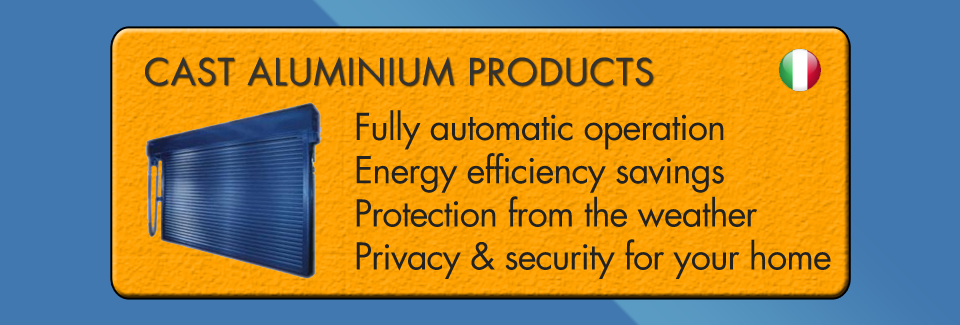
<style>
.page{position:relative;width:960px;height:325px;background:#4178af}
.page>*{position:absolute;margin:0}
.t1{font:36px "FuturaLT-Book";letter-spacing:0.025em;color:#333333}
.t2{font:36px "FuturaLT-Book";letter-spacing:-0.025em;color:#222222}
</style>
<div class="page">
<p class="t1" style="left:145px;top:56px;width:508px;height:30px">CAST ALUMINIUM PRODUCTS</p>
<p class="t2" style="left:356px;top:110px;width:475px;height:169px">Fully automatic operation<br>Energy efficiency savings<br>Protection from the weather<br>Privacy &amp; security for your home</p>
</div>
